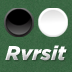
<style>
.page{position:relative;width:72px;height:72px}
.page>*{position:absolute;margin:0}
.t1{font:20px "GothamHTF-BlackItalic"}
</style>
<div class="page">
<p class="t1" style="left:5px;top:45px;width:62px;height:16px">Rvrsit</p>
</div>
